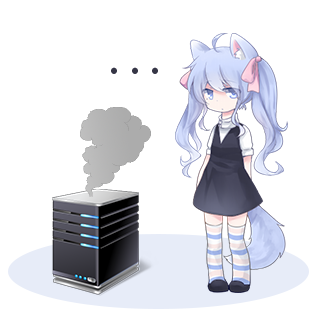
<style>
.page{position:relative;width:312px;height:312px;background:#ffffff}
.page>*{position:absolute;margin:0}
.t1{font:33px "NotoSansCJKtc-Bold";letter-spacing:0.3em;color:#353546}
</style>
<div class="page">
<p class="t1" style="left:111px;top:67px;width:47px;height:7px">...</p>
</div>
